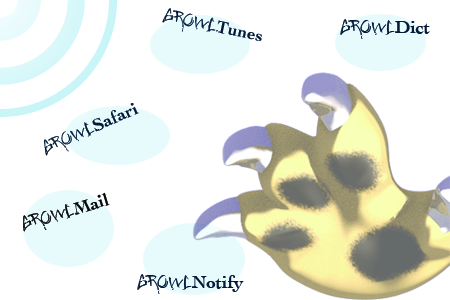
<style>
.page{position:relative;width:450px;height:300px;background:#ffffff}
.page>*{position:absolute;margin:0}
.t1{font:18px "JungleBold";color:#051b35}
.t2{font:18px "Cochin-Bold";color:#051b35}
.t3{font:18px "JungleBold";color:#080a0b}
.t4{font:18px "Cochin-Bold";color:#080a0b}
</style>
<div class="page">
<p class="t1" style="left:162px;top:8px;width:100px;height:33px;rotate:12deg">Growl<span class="t2">Tunes</span></p>
<p class="t1" style="left:340px;top:19px;width:90px;height:20px">Growl<span class="t2">Dict</span></p>
<p class="t2" style="left:43px;top:103px;width:96px;height:53px;rotate:-24deg"><span class="t1">Growl</span>Safari</p>
<p class="t3" style="left:23px;top:192px;width:87px;height:40px;rotate:-17deg">Growl<span class="t4">Mail</span></p>
<p class="t2" style="left:137px;top:274px;width:107px;height:20px"><span class="t1">Growl</span>Notify</p>
</div>
